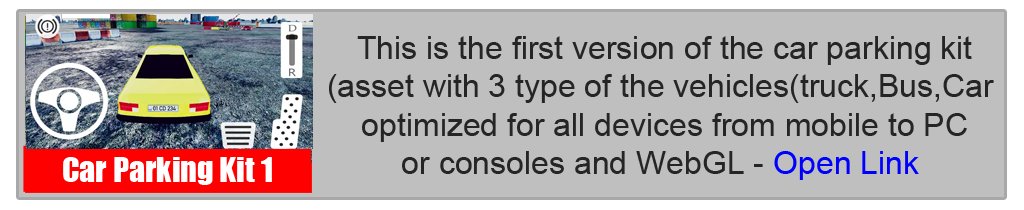
<style>
.page{position:relative;width:1024px;height:210px;background:#bfbfbf}
.page>*{position:absolute;margin:0}
.t1{font:32px "ArialMT";color:#252525}
.t2{font:32px "ArialMT";color:#0000ff}
.t3{font:32px "Impact";color:#ffffff}
</style>
<div class="page">
<p class="t1" style="left:329px;top:36px;width:665px;height:144px;text-align:center">This is the first version of the car parking kit <br>asset with 3 type of the vehicles(truck,Bus,Car)<br>optimized for all devices from mobile to PC <br>or consoles and WebGL - <span class="t2">Open Link</span></p>
<p class="t3" style="left:63px;top:157px;width:209px;height:28px">Car Parking Kit 1</p>
</div>
